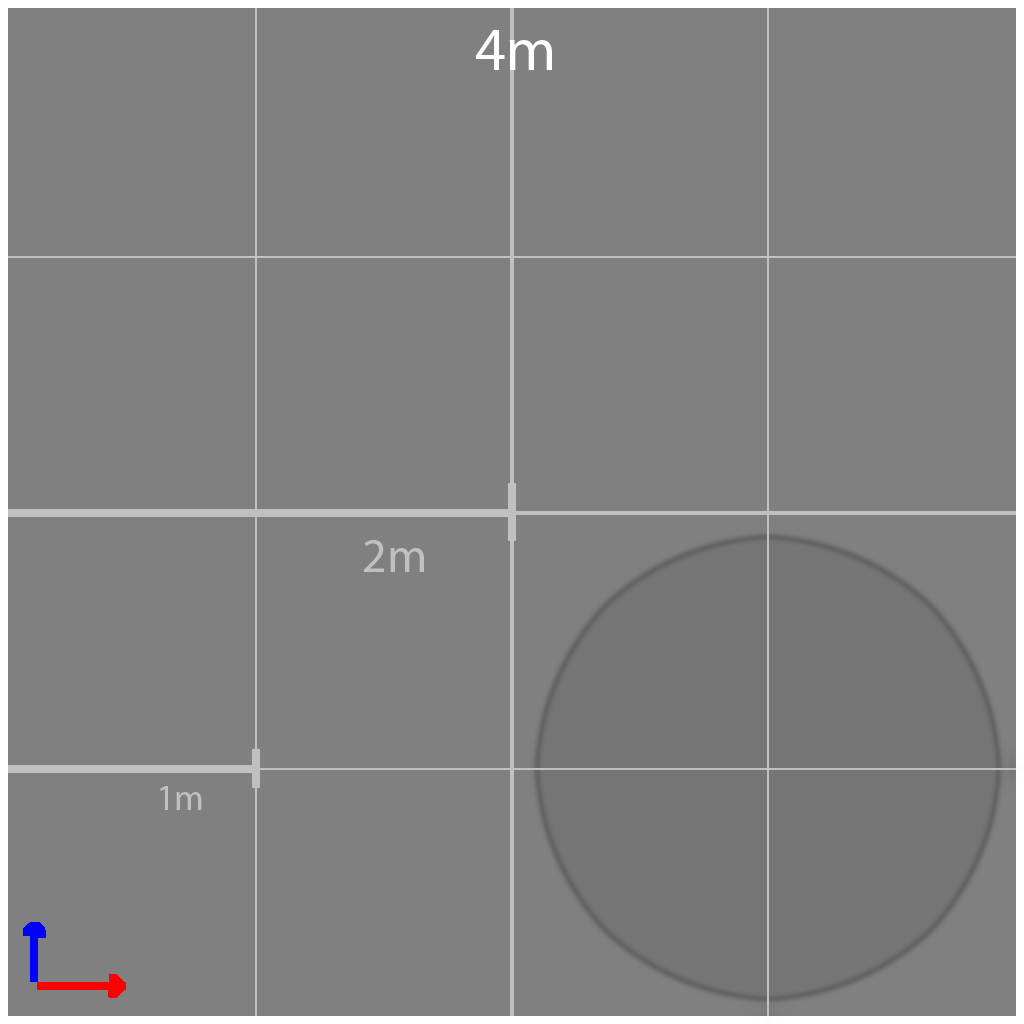
<style>
.page{position:relative;width:1024px;height:1024px;background:#808080}
.page>*{position:absolute;margin:0}
.t1{font:60px "MyriadPro-Regular";color:#ffffff}
.t2{font:48px "MyriadPro-Regular";color:#c0c0c0}
.t3{font:36px "MyriadPro-Regular";color:#c0c0c0}
</style>
<div class="page">
<p class="t1" style="left:476px;top:30px;width:76px;height:40px">4m</p>
<p class="t2" style="left:364px;top:540px;width:60px;height:32px">2m</p>
<p class="t3" style="left:160px;top:786px;width:42px;height:24px">1m</p>
</div>
